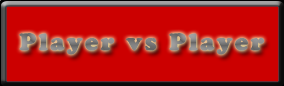
<style>
.page{position:relative;width:284px;height:86px;background:#cc0000}
.page>*{position:absolute;margin:0}
.t1{font:23.6px "CooperBlackStd";letter-spacing:0.1em;color:#848484}
</style>
<div class="page">
<p class="t1" style="left:19px;top:33px;width:245px;height:22px">Player vs Player</p>
</div>
